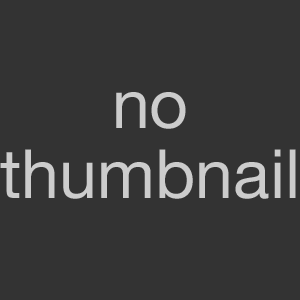
<style>
.page{position:relative;width:300px;height:300px;background:#333333}
.page>*{position:absolute;margin:0}
.t1{font:68px/70px "HelveticaNeue";color:#cccccc}
</style>
<div class="page">
<p class="t1" style="left:0px;top:92px;width:296px;height:107px;text-align:center">no<br>thumbnail</p>
</div>
